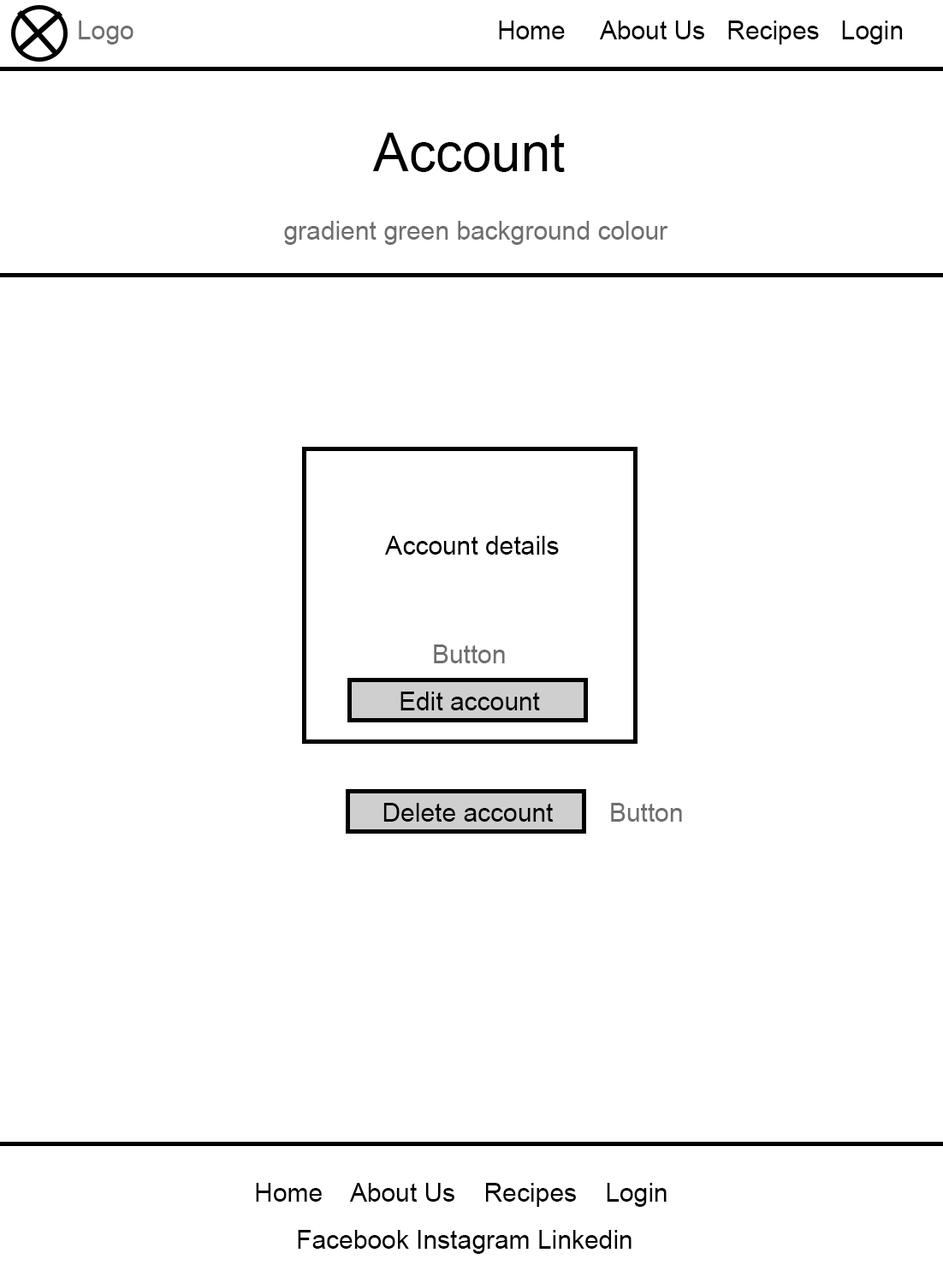
<style>
.page{position:relative;width:943px;height:1265px;background:#ffffff}
.page>*{position:absolute;margin:0}
.t1{font:25.7px "ArialMT";color:#6f6f6f}
.t2{font:25.7px "ArialMT";color:#000000}
.t3{font:53px "ArialMT";color:#000000}
</style>
<div class="page">
<p class="t1" style="left:79px;top:21px;width:54px;height:23px">Logo</p>
<p class="t2" style="left:499px;top:21px;width:404px;height:23px">Home     About Us   Recipes   Login</p>
<p class="t3" style="left:372px;top:133px;width:193px;height:39px">Account</p>
<p class="t1" style="left:284px;top:221px;width:384px;height:24px">gradient green background colour</p>
<p class="t2" style="left:384px;top:536px;width:175px;height:18px">Account details</p>
<p class="t1" style="left:434px;top:644px;width:71px;height:19px">Button</p>
<p class="t2" style="left:400px;top:691px;width:140px;height:19px">Edit account</p>
<p class="t2" style="left:383px;top:803px;width:170px;height:18px">Delete account</p>
<p class="t1" style="left:611px;top:803px;width:71px;height:18px">Button</p>
<p class="t2" style="left:256px;top:1182px;width:411px;height:24px">Home    About Us    Recipes    Login</p>
<p class="t2" style="left:298px;top:1230px;width:333px;height:24px">Facebook Instagram Linkedin</p>
</div>
